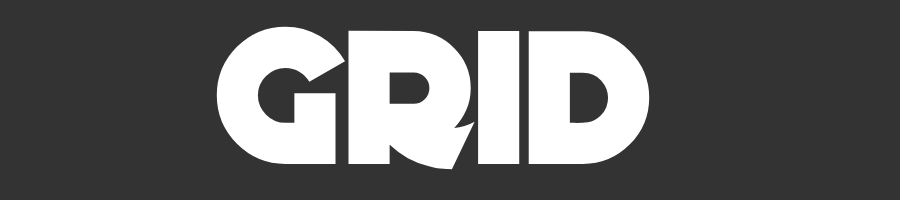
<style>
.page{position:relative;width:900px;height:200px;background:#333333}
.page>*{position:absolute;margin:0}
.t1{font:194px "Anagram";color:#ffffff}
</style>
<div class="page">
<p class="t1" style="left:216px;top:26px;width:434px;height:144px">GRID</p>
</div>
